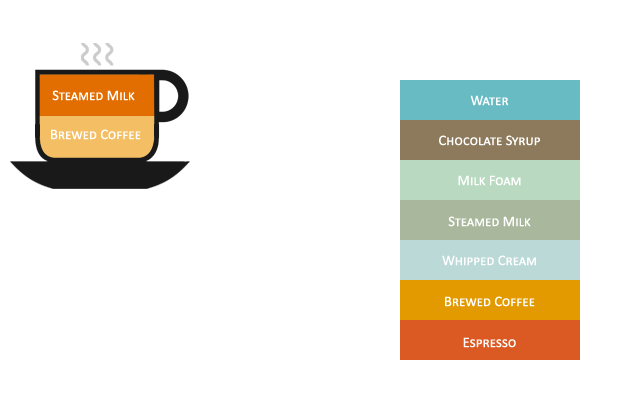
<style>
.page{position:relative;width:640px;height:400px;background:#ffffff}
.page>*{position:absolute;margin:0}
.t1{font:14.6px "Calibri";color:#ffffff;font-variant:small-caps}
</style>
<div class="page">
<p class="t1" style="left:52px;top:90px;width:83px;height:11px">Steamed Milk</p>
<p class="t1" style="left:470px;top:95px;width:39px;height:11px">Water</p>
<p class="t1" style="left:51px;top:129px;width:90px;height:11px">Brewed Coffee</p>
<p class="t1" style="left:439px;top:135px;width:101px;height:11px">Chocolate Syrup</p>
<p class="t1" style="left:458px;top:175px;width:63px;height:11px">Milk Foam</p>
<p class="t1" style="left:448px;top:216px;width:83px;height:11px">Steamed Milk</p>
<p class="t1" style="left:442px;top:255px;width:94px;height:11px">Whipped Cream</p>
<p class="t1" style="left:445px;top:296px;width:90px;height:11px">Brewed Coffee</p>
<p class="t1" style="left:463px;top:337px;width:53px;height:11px">Espresso</p>
</div>
